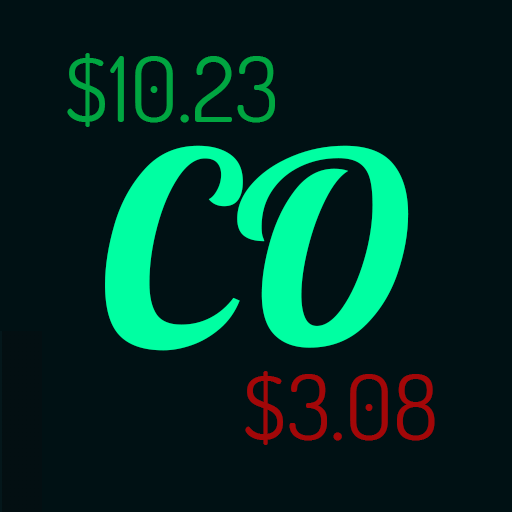
<style>
.page{position:relative;width:512px;height:512px;background:#001114}
.page>*{position:absolute;margin:0}
.t1{font:90px "Dosis-Regular";color:#00a641}
.t2{font:90px "Dosis-Regular";color:#a30708}
</style>
<div class="page">
<p class="t1" style="left:67px;top:53px;width:208px;height:74px">$10.23</p>
<p class="t2" style="left:245px;top:371px;width:190px;height:74px">$3.08</p>
</div>
